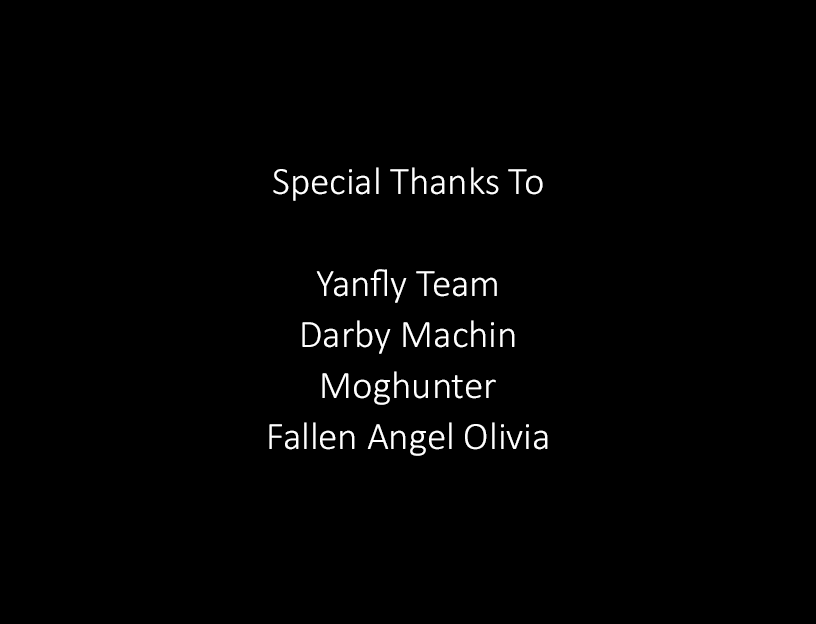
<style>
.page{position:relative;width:816px;height:624px;background:#000000}
.page>*{position:absolute;margin:0}
.t1{font:39px/51px "Calibri-Light";color:#ffffff}
</style>
<div class="page">
<p class="t1" style="left:269px;top:167px;width:279px;height:289px;text-align:center">Special Thanks To<br><br>Yanfly Team<br>Darby Machin<br>Moghunter<br>Fallen Angel Olivia</p>
</div>
